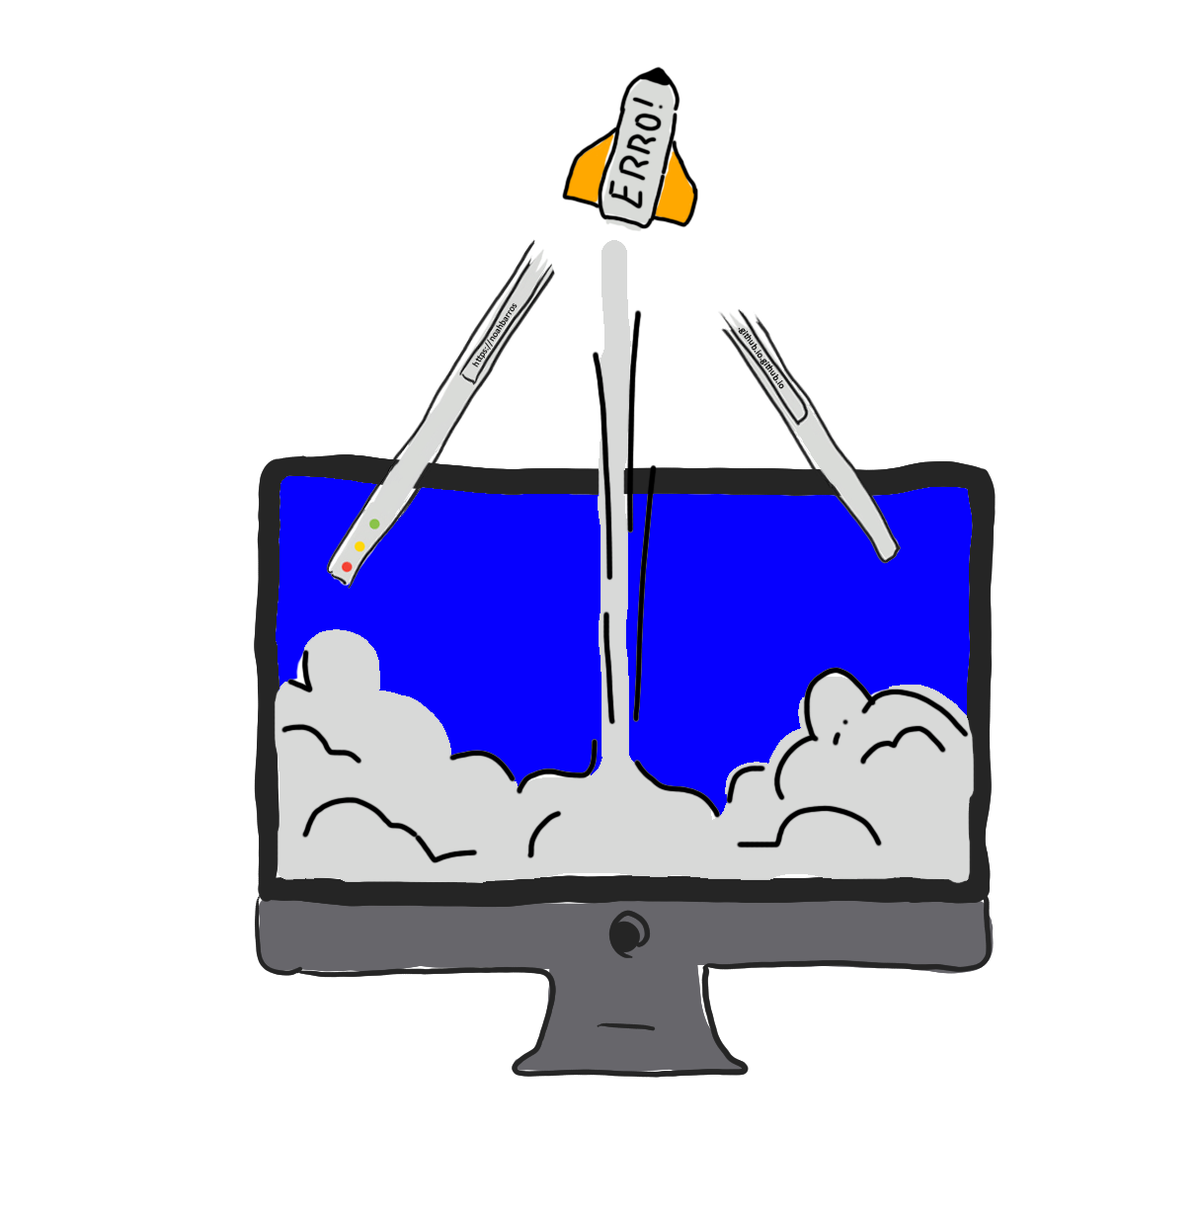
<style>
.page{position:relative;width:1199px;height:1214px;background:#ffffff}
.page>*{position:absolute;margin:0}
.t1{font:9px "Calibri";color:#000000;font-weight:bold}
</style>
<div class="page">
<p class="t1" style="left:472px;top:303px;width:46px;height:65px;rotate:-57deg">https://noahbarros</p>
<p class="t1" style="left:738px;top:327px;width:46px;height:62px;rotate:55deg">.github.io.github.io</p>
</div>
